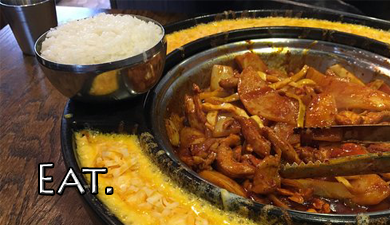
<style>
.page{position:relative;width:390px;height:225px}
.page>*{position:absolute;margin:0}
.t1{font:40px "LithosPro-Regular"}
</style>
<div class="page">
<p class="t1" style="left:40px;top:164px;width:72px;height:30px">Eat.</p>
</div>
